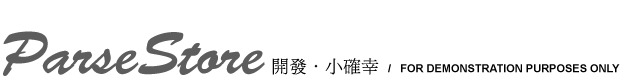
<style>
.page{position:relative;width:620px;height:80px;background:#ffffff}
.page>*{position:absolute;margin:0}
.t1{font:60px "BrushScriptStd";color:#5d5d5d}
.t2{font:18px "LiSungLight";color:#000000}
.t3{font:11px "Arial-BoldMT";color:#010101}
</style>
<div class="page">
<p class="t1" style="left:3px;top:31px;width:262px;height:45px">ParseStore</p>
<p class="t2" style="left:272px;top:58px;width:107px;height:17px">開發．小確幸</p>
<p class="t3" style="left:388px;top:64px;width:232px;height:9px">/   FOR DEMONSTRATION PURPOSES ONLY</p>
</div>
